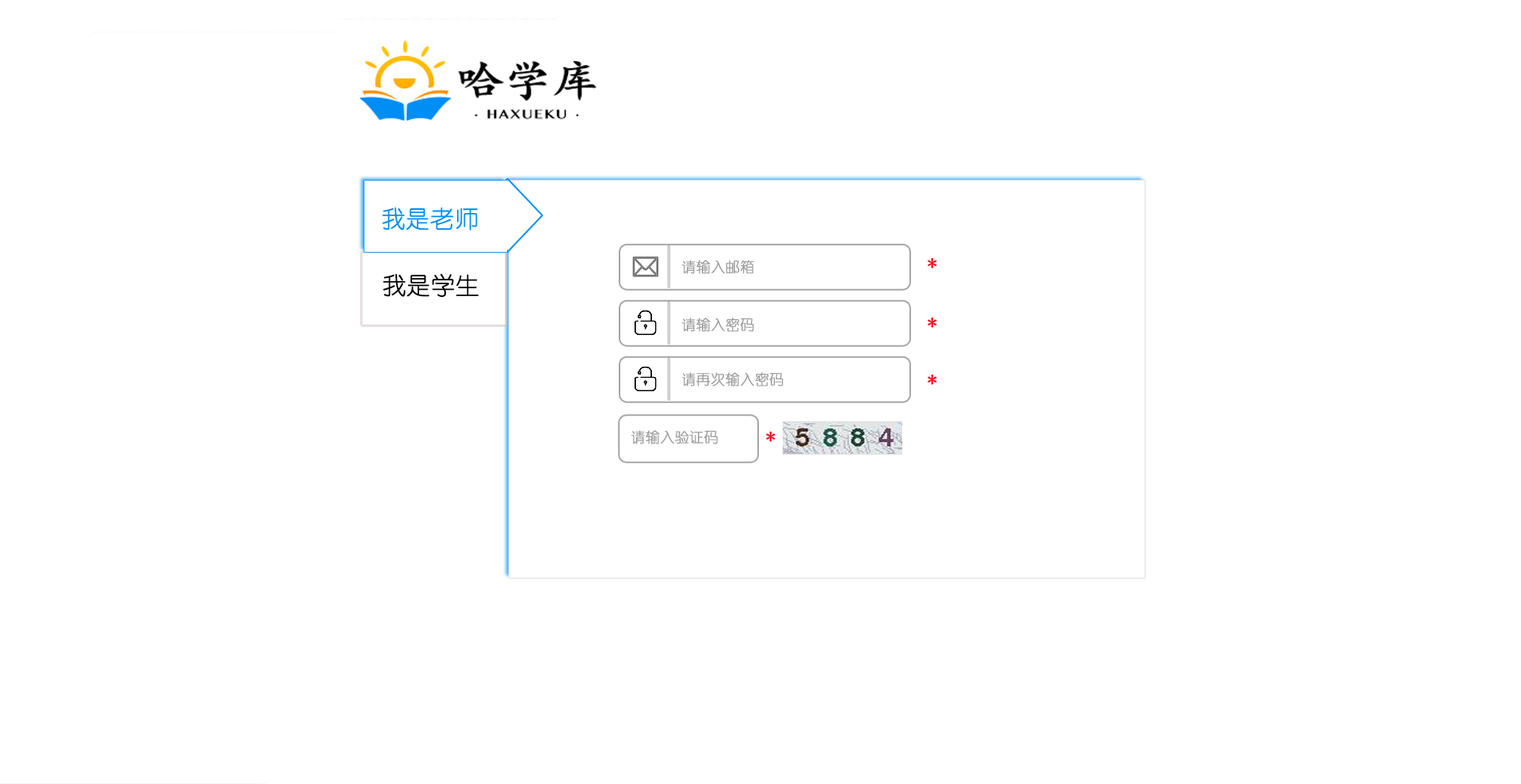
<style>
.page{position:relative;width:1521px;height:784px;background:#ffffff}
.page>*{position:absolute;margin:0}
.t1{font:23.8px "YouYuan";color:#008ef5;font-weight:bold}
.t2{font:14.3px "YouYuan";color:#9b9b9b;font-weight:bold}
.t3{font:19px "YouYuan";color:#ff051d;font-weight:bold}
.t4{font:23.8px "YouYuan";color:#000000;font-weight:bold}
</style>
<div class="page">
<p class="t1" style="left:382px;top:207px;width:96px;height:23px">我是老师</p>
<p class="t2" style="left:681px;top:260px;width:73px;height:14px">请输入邮箱</p>
<p class="t3" style="left:927px;top:258px;width:10px;height:11px">*</p>
<p class="t4" style="left:383px;top:273px;width:95px;height:24px">我是学生</p>
<p class="t2" style="left:681px;top:318px;width:73px;height:14px">请输入密码</p>
<p class="t3" style="left:927px;top:318px;width:10px;height:10px">*</p>
<p class="t2" style="left:681px;top:372px;width:102px;height:15px">请再次输入密码</p>
<p class="t3" style="left:927px;top:375px;width:10px;height:10px">*</p>
<p class="t2" style="left:630px;top:430px;width:88px;height:14px">请输入验证码</p>
<p class="t3" style="left:766px;top:432px;width:9px;height:10px">*</p>
</div>
